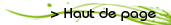
<style>
.page{position:relative;width:171px;height:25px;background:#ffffff}
.page>*{position:absolute;margin:0}
.t1{font:14px "DynameSSK";color:#030000;scale:1.1 1}
.t2{font:14px "DynameSSK-SemiBold";color:#030000;scale:1.1 1}
</style>
<div class="page">
<p class="t1" style="left:51px;top:8px;width:105px;height:13px"><span class="t2">&gt; </span>Haut de page</p>
</div>
